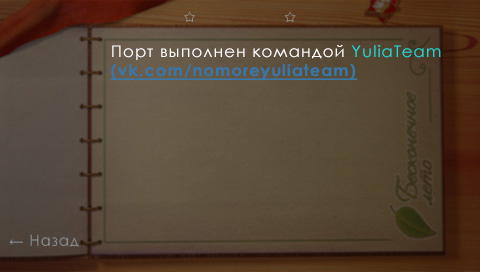
<style>
.page{position:relative;width:480px;height:272px}
.page>*{position:absolute;margin:0}
.t1{font:16.1px "CenturyGothic-Bold";letter-spacing:0.06em;color:#3678ab;text-decoration:underline}
.t2{font:16.1px "CenturyGothic";letter-spacing:0.06em;color:#ffffff}
.t3{font:16.1px "CenturyGothic";letter-spacing:0.06em;color:#13dbd7}
</style>
<div class="page">
<p class="t1" style="left:110px;top:45px;width:331px;height:35px"><span class="t2">Порт выполнен командой </span><span class="t3">YuliaTeam<br></span>(vk.com/nomoreyuliateam)</p>
</div>
